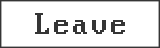
<style>
.page{position:relative;width:160px;height:48px;background:#ffffff}
.page>*{position:absolute;margin:0}
.t1{font:33.3px "PerfectDOSVGA437Win";color:#353535}
</style>
<div class="page">
<p class="t1" style="left:35px;top:13px;width:90px;height:21px">Leave</p>
</div>
